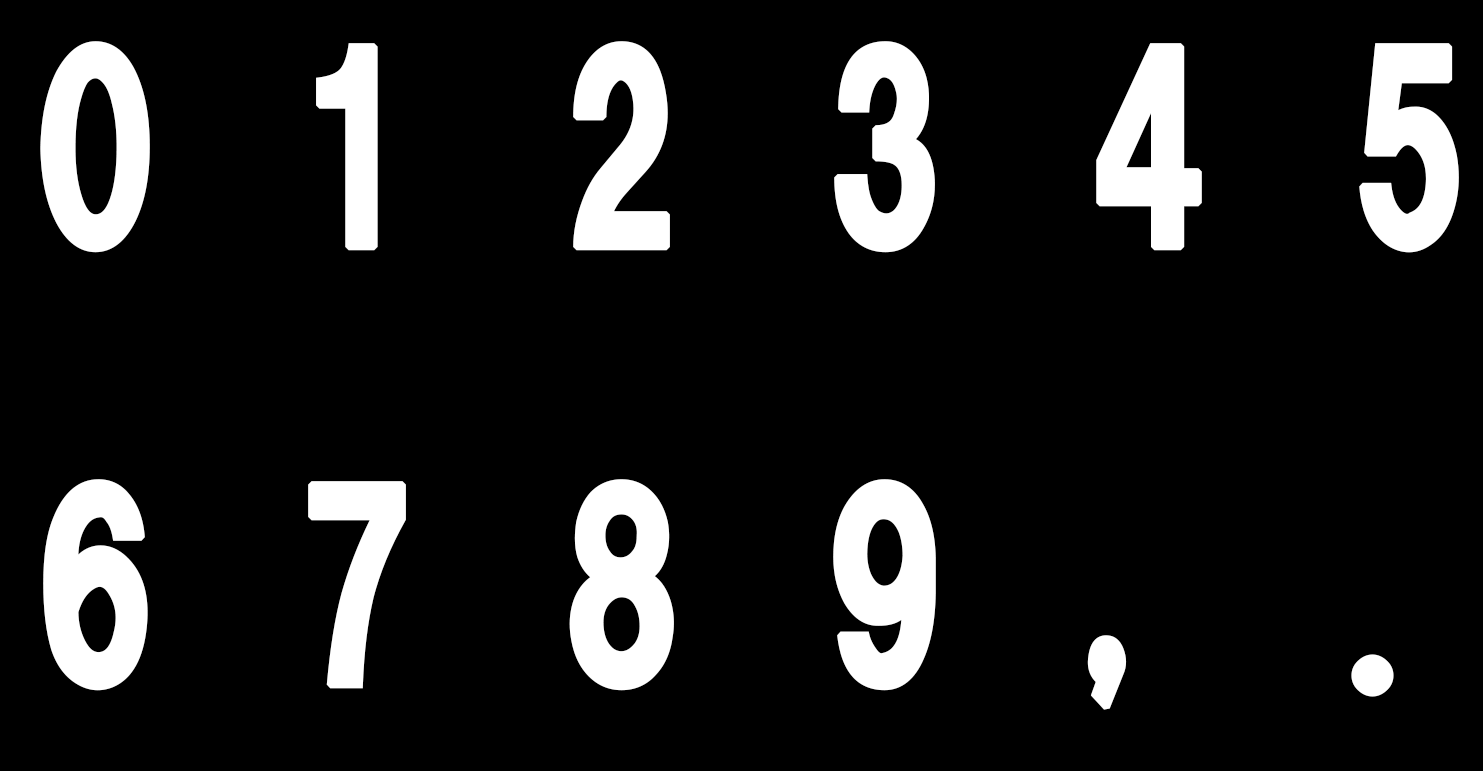
<style>
.page{position:relative;width:1483px;height:771px;background:#000000}
.page>*{position:absolute;margin:0}
.t1{font:250px "HGSoeiKakugothicUB";color:#ffffff;font-weight:bold}
</style>
<div class="page">
<p class="t1" style="left:40px;top:41px;width:1419px;height:669px">0 1 2 3 4 5<br>6 7 8 9 , .</p>
</div>
